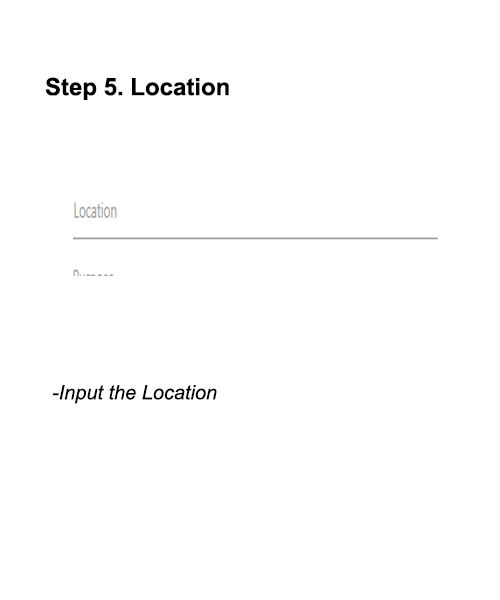
<style>
.page{position:relative;width:500px;height:600px;background:#ffffff}
.page>*{position:absolute;margin:0}
.t1{font:24px "Arial-BoldMT";color:#000000}
.t2{font:20px "Arial-ItalicMT";color:#000000}
</style>
<div class="page">
<p class="t1" style="left:45px;top:77px;width:184px;height:23px">Step 5. Location</p>
<p class="t2" style="left:52px;top:385px;width:165px;height:19px">-Input the Location</p>
</div>
